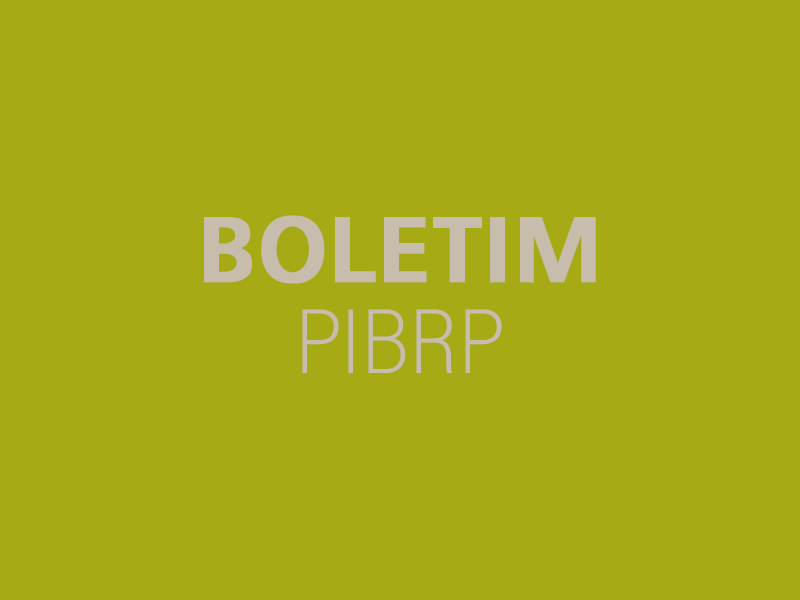
<style>
.page{position:relative;width:800px;height:600px;background:#a6aa15}
.page>*{position:absolute;margin:0}
.t1{font:92.2px/92.2px "Humanist777BT-BoldB";color:#c8bdad;font-weight:bold}
.t2{font:92.2px/92.2px "AcuminConcept_200.000wght_81.000wdth";color:#c8bdad;font-weight:bold}
</style>
<div class="page">
<p class="t1" style="left:204px;top:215px;width:392px;height:158px;text-align:center">BOLETIM<br><span class="t2">PIBRP</span></p>
</div>
